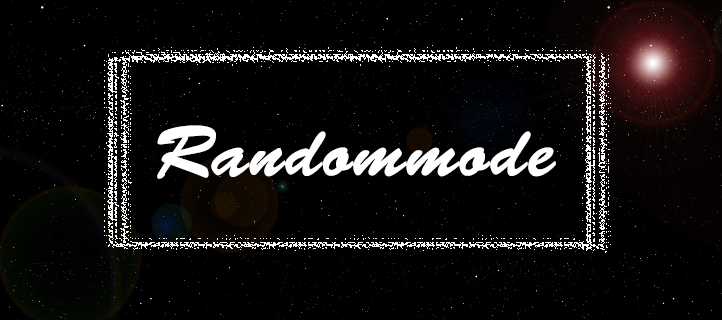
<style>
.page{position:relative;width:722px;height:320px;background:#000000}
.page>*{position:absolute;margin:0}
.t1{font:72px "BrushScriptStd";color:#ffffff;font-weight:bold}
</style>
<div class="page">
<p class="t1" style="left:157px;top:125px;width:399px;height:54px">Randommode</p>
</div>
